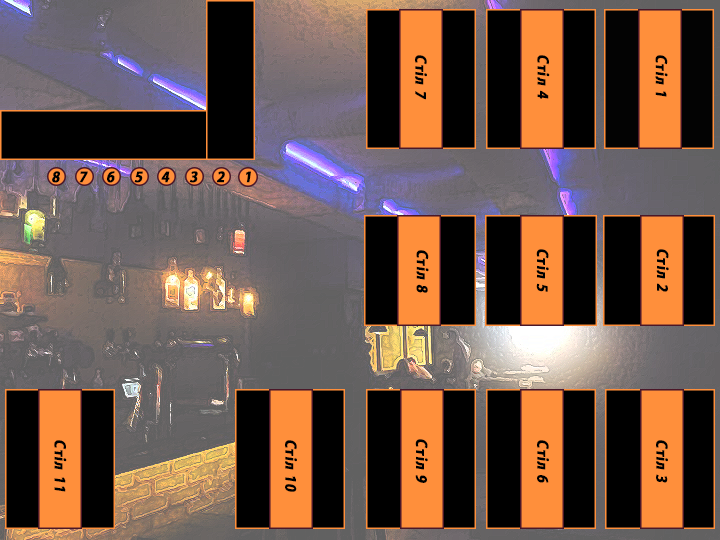
<style>
.page{position:relative;width:720px;height:540px;background:#000000}
.page>*{position:absolute;margin:0}
.t1{font:16.2px "MyriadPro-Bold";letter-spacing:0.06em;color:#000000;font-weight:bold;font-style:italic;scale:0.87 1}
</style>
<div class="page">
<p class="t1" style="left:415px;top:55px;width:12px;height:45px;rotate:90deg">Стіл 7</p>
<p class="t1" style="left:537px;top:55px;width:13px;height:44px;rotate:90deg">Стіл 4</p>
<p class="t1" style="left:655px;top:55px;width:13px;height:42px;rotate:90deg">Стіл 1</p>
<p class="t1" style="left:52px;top:171px;width:8px;height:12px">8</p>
<p class="t1" style="left:79px;top:171px;width:9px;height:12px">7</p>
<p class="t1" style="left:107px;top:171px;width:8px;height:12px">6</p>
<p class="t1" style="left:134px;top:171px;width:9px;height:12px">5</p>
<p class="t1" style="left:161px;top:171px;width:9px;height:12px">4</p>
<p class="t1" style="left:189px;top:171px;width:9px;height:12px">3</p>
<p class="t1" style="left:216px;top:171px;width:9px;height:12px">2</p>
<p class="t1" style="left:246px;top:171px;width:5px;height:12px">1</p>
<p class="t1" style="left:416px;top:250px;width:13px;height:43px;rotate:90deg">Стіл 8</p>
<p class="t1" style="left:536px;top:249px;width:13px;height:43px;rotate:90deg">Стіл 5</p>
<p class="t1" style="left:656px;top:249px;width:13px;height:43px;rotate:90deg">Стіл 2</p>
<p class="t1" style="left:54px;top:440px;width:13px;height:52px;rotate:90deg">Стіл 11</p>
<p class="t1" style="left:285px;top:440px;width:12px;height:52px;rotate:90deg">Стіл 10</p>
<p class="t1" style="left:415px;top:439px;width:13px;height:44px;rotate:90deg">Стіл 9</p>
<p class="t1" style="left:537px;top:440px;width:12px;height:43px;rotate:90deg">Стіл 6</p>
<p class="t1" style="left:656px;top:440px;width:12px;height:43px;rotate:90deg">Стіл 3</p>
</div>
